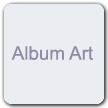
<style>
.page{position:relative;width:108px;height:108px;background:#eaedf1}
.page>*{position:absolute;margin:0}
.t1{font:18.8px "ArialMT";color:#8c8ea5}
</style>
<div class="page">
<p class="t1" style="left:11px;top:46px;width:82px;height:14px">Album Art</p>
</div>
